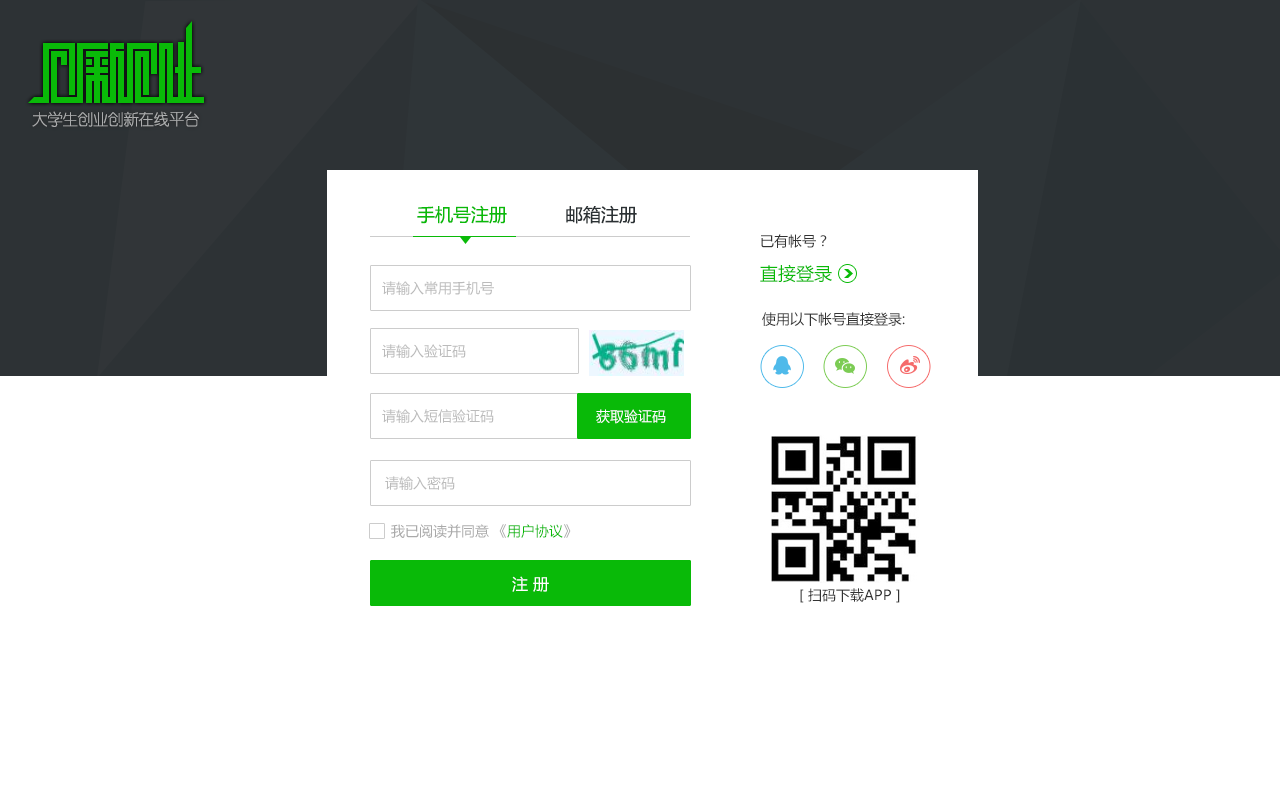
<style>
.page{position:relative;width:1280px;height:800px;background:#ffffff}
.page>*{position:absolute;margin:0}
.t1{font:16px "YouYuan";letter-spacing:-0.05em;color:#acadae}
.t2{font:18px "MicrosoftYaHei";color:#09ba08}
.t3{font:18px "MicrosoftYaHei";color:#2b3134}
.t4{font:14px "MicrosoftYaHei";color:#333333}
.t5{font:14px "MicrosoftYaHei";color:#bbbbbb}
.t6{font:14px "MicrosoftYaHei";color:#ffffff}
.t7{font:14px "MicrosoftYaHei";color:#aaaaaa}
.t8{font:14px "MicrosoftYaHei";color:#09ba08}
.t9{font:16px "MicrosoftYaHei";color:#ffffff}
</style>
<div class="page">
<p class="t1" style="left:32px;top:111px;width:167px;height:16px">大学生创业创新在线平台</p>
<p class="t2" style="left:417px;top:205px;width:90px;height:19px">手机号注册</p>
<p class="t3" style="left:566px;top:205px;width:71px;height:19px">邮箱注册</p>
<p class="t4" style="left:761px;top:234px;width:66px;height:14px">已有帐号？</p>
<p class="t2" style="left:760px;top:264px;width:72px;height:19px">直接登录</p>
<p class="t5" style="left:382px;top:281px;width:112px;height:14px">请输入常用手机号</p>
<p class="t4" style="left:762px;top:312px;width:143px;height:14px">使用以下帐号直接登录:</p>
<p class="t5" style="left:382px;top:344px;width:84px;height:14px">请输入验证码</p>
<p class="t5" style="left:382px;top:409px;width:112px;height:14px">请输入短信验证码</p>
<p class="t6" style="left:596px;top:409px;width:70px;height:15px">获取验证码</p>
<p class="t5" style="left:385px;top:476px;width:70px;height:14px">请输入密码</p>
<p class="t7" style="left:391px;top:524px;width:180px;height:14px">我已阅读并同意 《<span class="t8">用户协议</span>》</p>
<p class="t9" style="left:512px;top:576px;width:37px;height:16px">注 册</p>
<p class="t4" style="left:800px;top:588px;width:100px;height:15px">[ 扫码下载APP ]</p>
</div>
